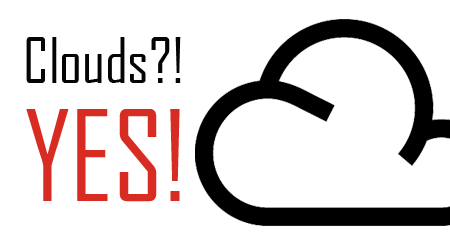
<style>
.page{position:relative;width:450px;height:250px;background:#ffffff}
.page>*{position:absolute;margin:0}
.t1{font:60px "AgencyFB-Reg";color:#040404}
.t2{font:120px "AgencyFB-Reg";color:#d82c22}
</style>
<div class="page">
<p class="t1" style="left:26px;top:37px;width:155px;height:46px">Clouds?!</p>
<p class="t2" style="left:26px;top:109px;width:154px;height:93px">YES!</p>
</div>
